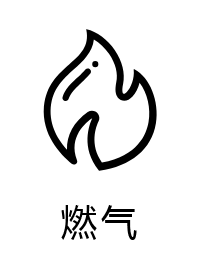
<style>
.page{position:relative;width:200px;height:255px;background:#ffffff}
.page>*{position:absolute;margin:0}
.t1{font:36px "MicrosoftYaHei";letter-spacing:0.1em;color:#000000}
</style>
<div class="page">
<p class="t1" style="left:61px;top:205px;width:76px;height:35px">燃气</p>
</div>
